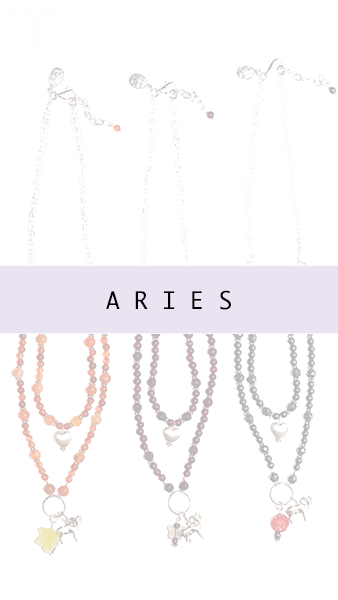
<style>
.page{position:relative;width:338px;height:600px;background:#ffffff}
.page>*{position:absolute;margin:0}
.t1{font:23.5px "Ayuthaya";color:#000000}
</style>
<div class="page">
<p class="t1" style="left:106px;top:290px;width:125px;height:20px">A R I E S</p>
</div>
